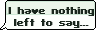
<style>
.page{position:relative;width:96px;height:30px;background:#fcfffb}
.page>*{position:absolute;margin:0}
.t1{font:10px "SFPixelate-Bold";color:#1b281e}
</style>
<div class="page">
<p class="t1" style="left:8px;top:7px;width:85px;height:21px;text-align:center">I have nothing<br>left to say...</p>
<p class="t1" style="left:9px;top:7px;width:85px;height:21px;text-align:center">I have nothing<br>left to say...</p>
</div>
